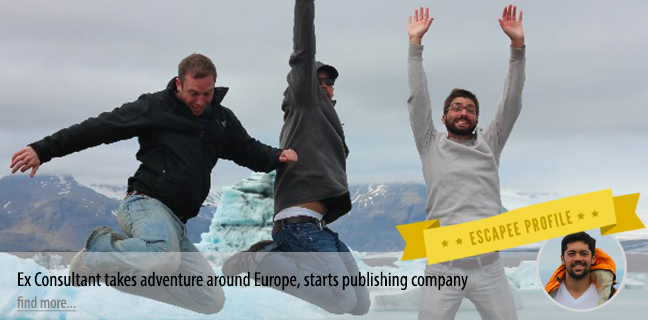
<style>
.page{position:relative;width:648px;height:320px}
.page>*{position:absolute;margin:0}
.t1{font:20.2px "MyriadPro-Cond";color:#000000}
.t2{font:16.6px "MyriadPro-Cond";color:#808080;text-decoration:underline}
</style>
<div class="page">
<p class="t1" style="left:18px;top:271px;width:450px;height:20px">Ex Consultant takes adventure around Europe, starts publishing company</p>
<p class="t2" style="left:16px;top:296px;width:61px;height:16px">find more...</p>
</div>
